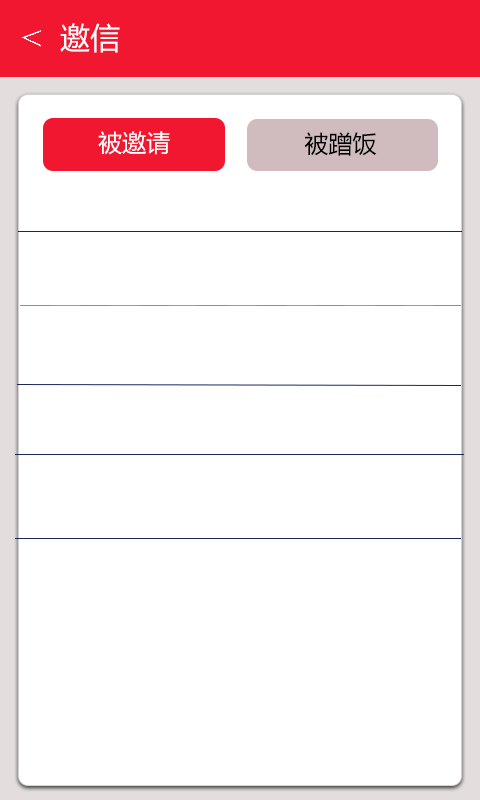
<style>
.page{position:relative;width:480px;height:800px;background:#ffffff}
.page>*{position:absolute;margin:0}
.t1{font:30px "MicrosoftYaHei";color:#ffffff}
.t2{font:24px "MicrosoftYaHei";color:#ffffff}
.t3{font:24px "MicrosoftYaHei";color:#000000}
</style>
<div class="page">
<p class="t1" style="left:60px;top:23px;width:60px;height:30px">邀信</p>
<p class="t2" style="left:98px;top:131px;width:72px;height:24px">被邀请</p>
<p class="t3" style="left:304px;top:132px;width:73px;height:24px">被蹭饭</p>
</div>
